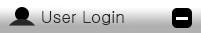
<style>
.page{position:relative;width:201px;height:33px;background:#ffffff}
.page>*{position:absolute;margin:0}
.t1{font:16.7px "Gulim";color:#282828}
</style>
<div class="page">
<p class="t1" style="left:42px;top:11px;width:82px;height:14px">User Login</p>
</div>
